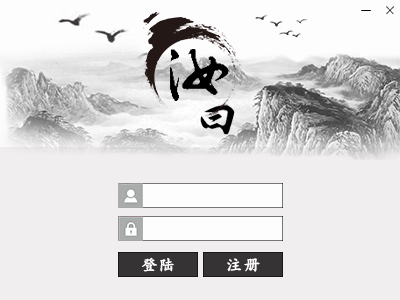
<style>
.page{position:relative;width:400px;height:300px;background:#f0eeee}
.page>*{position:absolute;margin:0}
.t1{font:12px "STKaiti";letter-spacing:0.081em;color:#fdfbfb;text-transform:uppercase;font-weight:bold}
</style>
<div class="page">
<p class="t1" style="left:142px;top:257px;width:32px;height:15px">登陆</p>
<p class="t1" style="left:227px;top:258px;width:33px;height:14px">注册</p>
</div>
